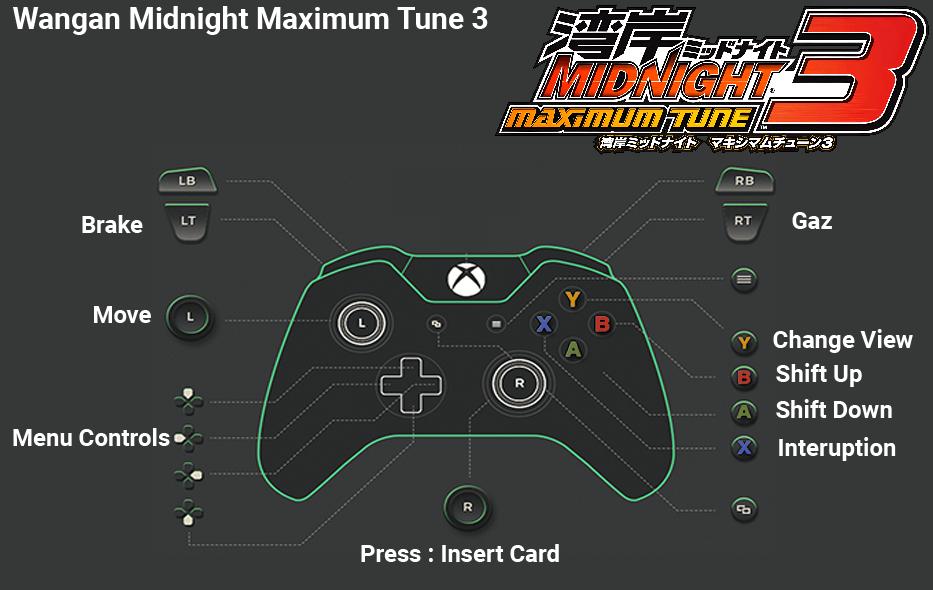
<style>
.page{position:relative;width:933px;height:590px;background:#363838}
.page>*{position:absolute;margin:0}
.t1{font:30px "Roboto-Bold";color:#ffffff}
.t2{font:24px "Roboto-Bold";color:#ffffff}
</style>
<div class="page">
<p class="t1" style="left:13px;top:6px;width:475px;height:29px">Wangan Midnight Maximum Tune 3</p>
<p class="t2" style="left:82px;top:215px;width:61px;height:18px">Brake</p>
<p class="t2" style="left:792px;top:212px;width:40px;height:17px">Gaz</p>
<p class="t2" style="left:94px;top:306px;width:57px;height:17px">Move</p>
<p class="t2" style="left:773px;top:329px;width:140px;height:24px">Change View</p>
<p class="t2" style="left:776px;top:363px;width:86px;height:24px">Shift Up</p>
<p class="t2" style="left:776px;top:399px;width:116px;height:19px">Shift Down</p>
<p class="t2" style="left:13px;top:428px;width:157px;height:18px">Menu Controls</p>
<p class="t2" style="left:779px;top:437px;width:117px;height:24px">Interuption</p>
<p class="t2" style="left:361px;top:544px;width:198px;height:18px">Press : Insert Card</p>
</div>
